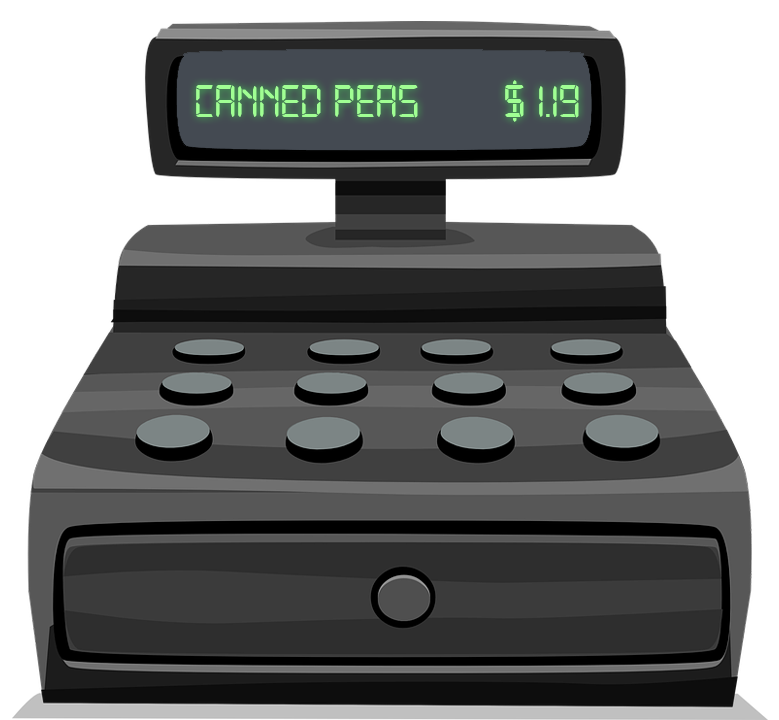
<style>
.page{position:relative;width:779px;height:720px;background:#ffffff}
.page>*{position:absolute;margin:0}
.t1{font:48px "Digital-7";letter-spacing:-0.02em;color:#a0ff93}
</style>
<div class="page">
<p class="t1" style="left:196px;top:80px;width:383px;height:42px">CANNED PEAS       $ 1.19</p>
</div>
